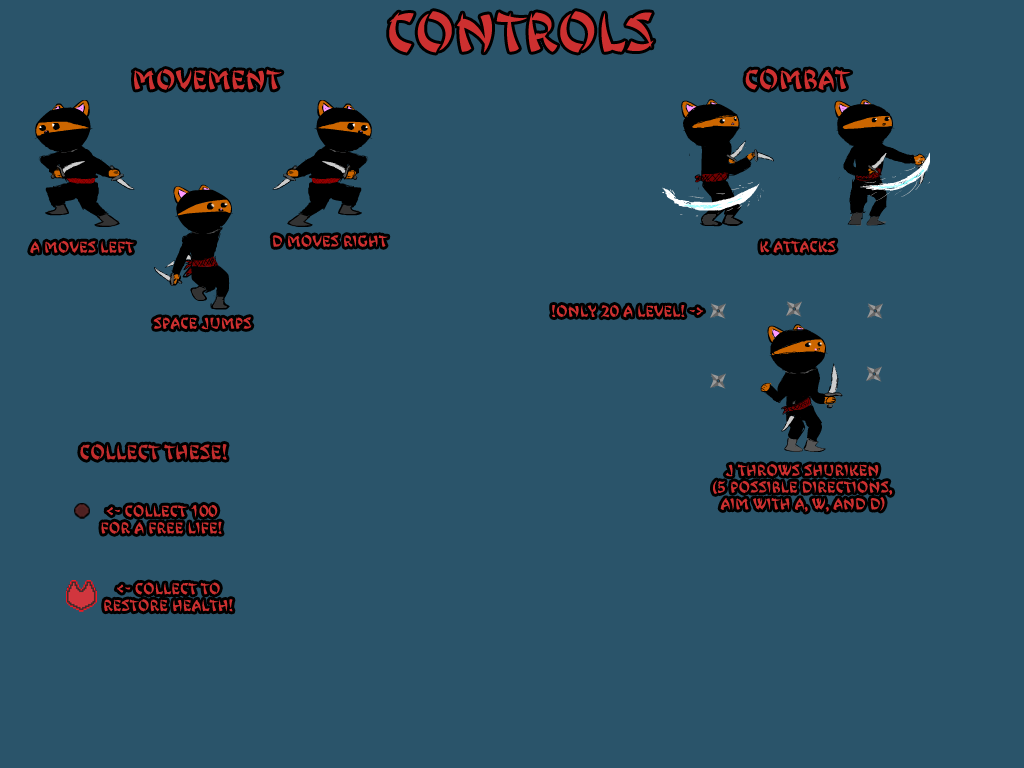
<style>
.page{position:relative;width:1024px;height:768px;background:#2a546a}
.page>*{position:absolute;margin:0}
.t1{font:48px "JingJing";color:#cd3030}
.t2{font:24px "JingJing";color:#cd3030}
.t3{font:14px "JingJing";color:#cd3030}
.t4{font:18px "JingJing";color:#c12d2d}
</style>
<div class="page">
<p class="t1" style="left:389px;top:11px;width:265px;height:42px">CONTROLS</p>
<p class="t2" style="left:133px;top:69px;width:149px;height:21px">MOVEMENT</p>
<p class="t2" style="left:745px;top:68px;width:106px;height:22px">COMBAT</p>
<p class="t3" style="left:30px;top:240px;width:105px;height:14px">A MOVES LEFT</p>
<p class="t3" style="left:272px;top:234px;width:116px;height:13px">D MOVES RIGHT</p>
<p class="t3" style="left:760px;top:240px;width:76px;height:13px">k attacks</p>
<p class="t3" style="left:552px;top:305px;width:152px;height:13px">!ONLY 20 A LEVEL! -&gt;</p>
<p class="t3" style="left:153px;top:317px;width:99px;height:13px">SPACE JUMPS</p>
<p class="t4" style="left:80px;top:444px;width:147px;height:16px">collect these!</p>
<p class="t3" style="left:713px;top:464px;width:180px;height:48px;text-align:center">J THROWS SHURIKEN<br>(5 POSSIBLE DIRECTIONS,<br>AIM WITH A, W, AND D)</p>
<p class="t3" style="left:101px;top:504px;width:121px;height:30px;text-align:center">&lt;- COLLECT 100<br>FOR A FREE LIFE!</p>
<p class="t3" style="left:104px;top:582px;width:129px;height:30px;text-align:center">&lt;- COLLECT TO<br>RESTORE HEALTH!</p>
</div>
